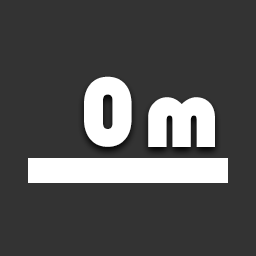
<style>
.page{position:relative;width:256px;height:256px;background:#333333}
.page>*{position:absolute;margin:0}
.t1{font:100px "Bauhaus93";color:#ffffff}
</style>
<div class="page">
<p class="t1" style="left:84px;top:76px;width:48px;height:71px">0</p>
<p class="t1" style="left:148px;top:97px;width:67px;height:50px">m</p>
</div>
